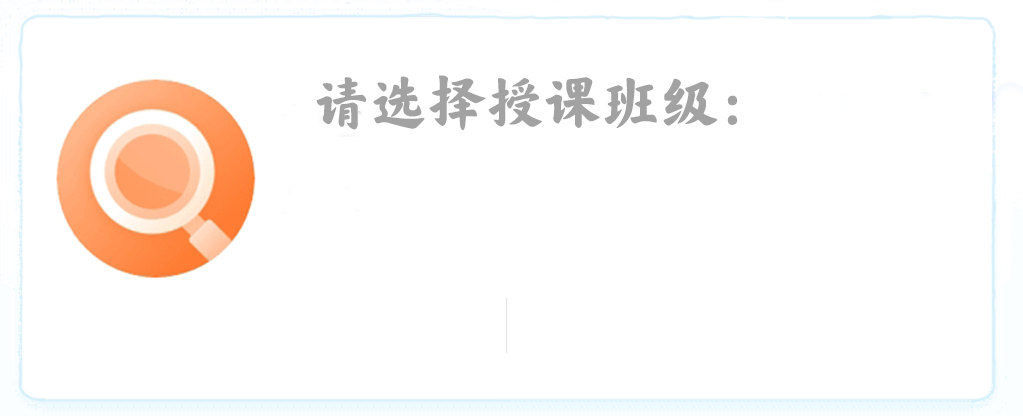
<style>
.page{position:relative;width:1023px;height:416px;background:#ffffff}
.page>*{position:absolute;margin:0}
.t1{font:58px "COCA-COLACAREFONTKAITI--GB1-0";color:#a2a2a2}
</style>
<div class="page">
<p class="t1" style="left:316px;top:75px;width:422px;height:56px">请选择授课班级：</p>
</div>
